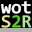
<style>
.page{position:relative;width:32px;height:32px;background:#000000}
.page>*{position:absolute;margin:0}
.t1{font:18px/14px "Consolas";letter-spacing:-0.025em;color:#ffffff;font-weight:bold;scale:1.03 1}
.t2{font:18px/14px "Consolas";letter-spacing:-0.025em;color:#e9e691;font-weight:bold;scale:1.03 1}
.t3{font:18px/14px "Consolas";letter-spacing:-0.025em;color:#4fdb11;font-weight:bold;scale:1.03 1}
.t4{font:18px/14px "Consolas";letter-spacing:-0.025em;color:#ace494;font-weight:bold;scale:1.03 1}
</style>
<div class="page">
<p class="t1" style="left:1px;top:1px;width:31px;height:27px">wot<br><span class="t2">S</span><span class="t3">2</span><span class="t4">R</span></p>
</div>
